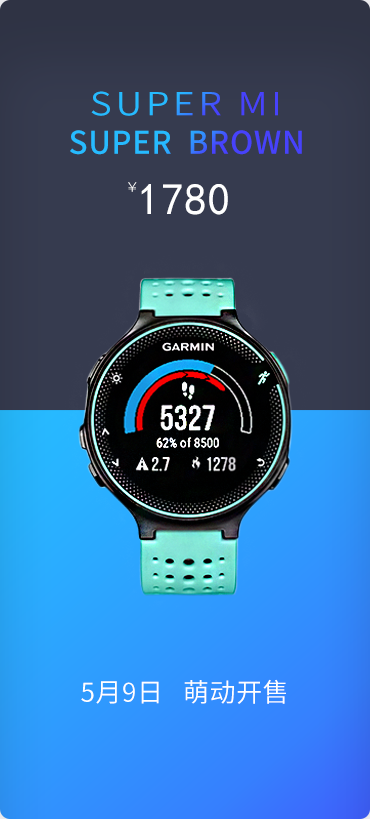
<style>
.page{position:relative;width:370px;height:819px;background:#363b4f}
.page>*{position:absolute;margin:0}
.t1{font:31.7px "SourceHanSansCN-Normal";letter-spacing:0.1em;scale:1.18 1}
.t2{font:31.3px "SourceHanSansCN-Medium";letter-spacing:0.025em}
.t3{font:13.5px "SourceHanSansCN-Light";letter-spacing:0.025em;color:#ffffff;scale:1.36 1}
.t4{font:44.5px "SimHei";letter-spacing:0.025em;color:#ffffff}
.t5{font:26px "SourceHanSansCN-Normal";letter-spacing:0.025em;color:#ffffff}
</style>
<div class="page">
<p class="t1" style="left:91px;top:91px;width:187px;height:25px">SUPER MI</p>
<p class="t2" style="left:70px;top:130px;width:232px;height:25px">SUPER  BROWN</p>
<p class="t3" style="left:128px;top:182px;width:9px;height:10px">¥</p>
<p class="t4" style="left:141px;top:184px;width:87px;height:31px">1780</p>
<p class="t5" style="left:81px;top:679px;width:205px;height:25px">5月9日   萌动开售</p>
</div>
